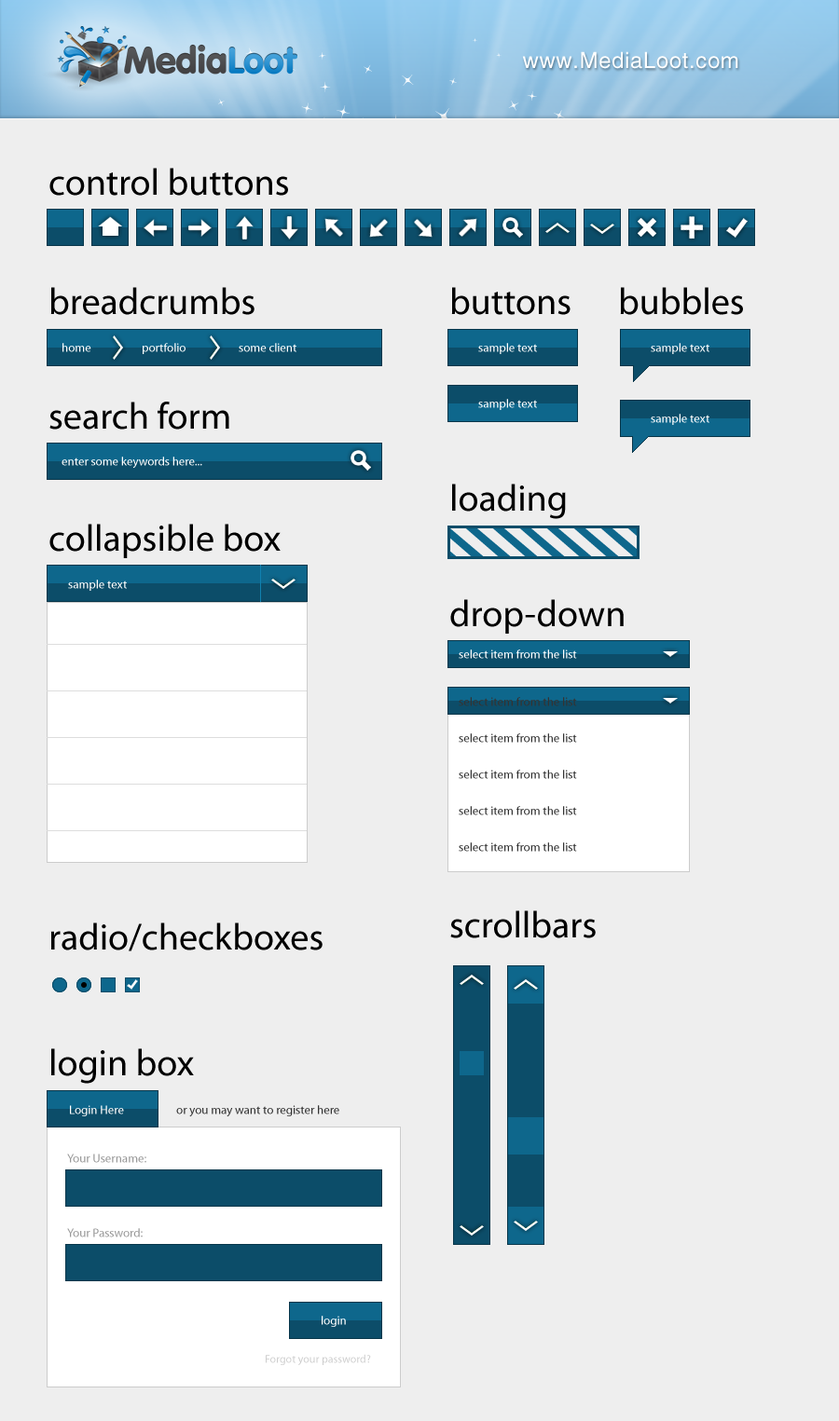
<style>
.page{position:relative;width:839px;height:1421px;background:#eeeeee}
.page>*{position:absolute;margin:0}
.t1{font:22.4px "HelveticaLTStd-Roman";letter-spacing:0.025em;color:#ffffff}
.t2{font:37.3px "MyriadPro-Regular";color:#000000}
.t3{font:12.1px "MyriadPro-Regular";color:#ffffff}
.t4{font:12.1px/36.4px "MyriadPro-Regular";color:#333333}
.t5{font:12.1px "MyriadPro-Regular";color:#333333}
.t6{font:12.1px "MyriadPro-Regular";color:#999999}
.t7{font:11.2px "MyriadPro-Regular";color:#cccccc}
</style>
<div class="page">
<p class="t1" style="left:522px;top:51px;width:216px;height:18px">www.MediaLoot.com</p>
<p class="t2" style="left:49px;top:168px;width:239px;height:28px">control buttons</p>
<p class="t2" style="left:50px;top:287px;width:204px;height:28px">breadcrumbs</p>
<p class="t2" style="left:451px;top:287px;width:119px;height:28px">buttons</p>
<p class="t2" style="left:620px;top:287px;width:123px;height:28px">bubbles</p>
<p class="t3" style="left:62px;top:343px;width:29px;height:9px">home</p>
<p class="t3" style="left:143px;top:343px;width:42px;height:11px">portfolio</p>
<p class="t3" style="left:239px;top:343px;width:57px;height:9px">some client</p>
<p class="t3" style="left:478px;top:343px;width:59px;height:11px">sample text</p>
<p class="t3" style="left:651px;top:343px;width:58px;height:11px">sample text</p>
<p class="t2" style="left:49px;top:402px;width:180px;height:28px">search form</p>
<p class="t3" style="left:478px;top:399px;width:59px;height:11px">sample text</p>
<p class="t3" style="left:651px;top:414px;width:58px;height:11px">sample text</p>
<p class="t3" style="left:62px;top:457px;width:140px;height:12px">enter some keywords here...</p>
<p class="t2" style="left:452px;top:484px;width:114px;height:35px">loading</p>
<p class="t2" style="left:49px;top:524px;width:232px;height:34px">collapsible box</p>
<p class="t3" style="left:68px;top:580px;width:59px;height:11px">sample text</p>
<p class="t2" style="left:450px;top:599px;width:174px;height:35px">drop-down</p>
<p class="t3" style="left:459px;top:650px;width:118px;height:9px">select item from the list</p>
<p class="t4" style="left:459px;top:697px;width:118px;height:155px">select item from the list<br>select item from the list<br>select item from the list<br>select item from the list<br>select item from the list</p>
<p class="t2" style="left:450px;top:911px;width:146px;height:28px">scrollbars</p>
<p class="t2" style="left:50px;top:923px;width:273px;height:29px">radio/checkboxes</p>
<p class="t2" style="left:51px;top:1049px;width:143px;height:35px">login box</p>
<p class="t3" style="left:70px;top:1105px;width:54px;height:12px">Login Here</p>
<p class="t5" style="left:176px;top:1105px;width:163px;height:13px">or you may want to register here</p>
<p class="t6" style="left:67px;top:1154px;width:79px;height:9px">Your Username:</p>
<p class="t6" style="left:67px;top:1229px;width:76px;height:9px">Your Password:</p>
<p class="t3" style="left:322px;top:1316px;width:24px;height:11px">login</p>
<p class="t7" style="left:266px;top:1354px;width:105px;height:12px">Forgot your password?</p>
</div>
